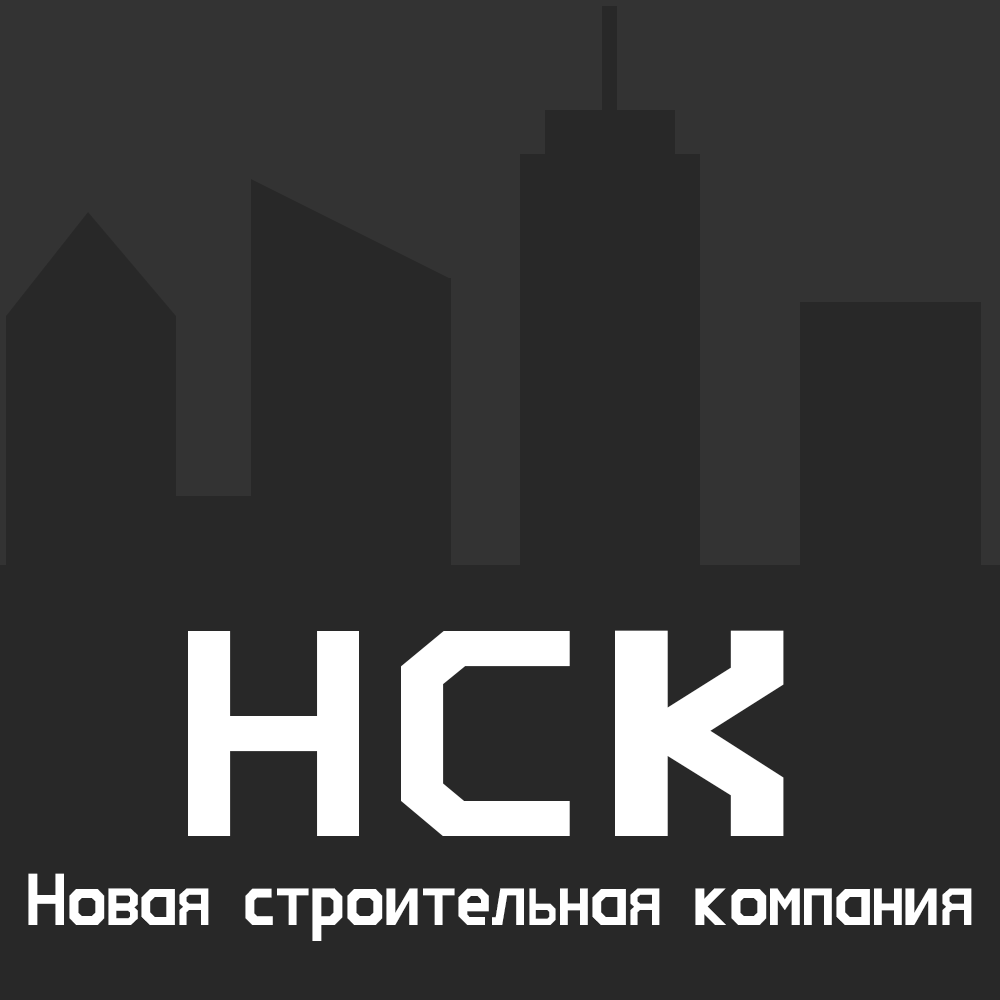
<style>
.page{position:relative;width:1000px;height:1000px;background:#282828}
.page>*{position:absolute;margin:0}
.t1{font:250px "WillowBodyCYR";color:#ffffff}
.t2{font:250px "WillowBodyCYR";letter-spacing:0.06em;color:#ffffff;scale:1.2 1}
.t3{font:250px "WillowBodyCYR";letter-spacing:0.06em;color:#ffffff;scale:1.5 1}
.t4{font:62.5px "WillowBodyCYR";color:#ffffff}
</style>
<div class="page">
<p class="t1" style="left:188px;top:630px;width:596px;height:206px"><span class="t2">НС</span><span class="t3">К<br><br></span>1<br>СК</p>
<p class="t4" style="left:28px;top:873px;width:944px;height:68px">Новая строительная компания</p>
</div>
